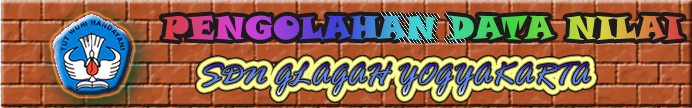
<style>
.page{position:relative;width:692px;height:108px}
.page>*{position:absolute;margin:0}
.t1{font:32px "SnapITC-Regular"}
.t2{font:32px "RageItalic"}
</style>
<div class="page">
<p class="t1" style="left:162px;top:15px;width:522px;height:26px">PENGOLAHAN DATA NILAI</p>
<p class="t2" style="left:202px;top:62px;width:389px;height:34px">SDN GLAGAH YOGYAKARTA</p>
</div>
